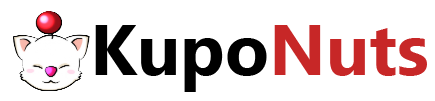
<style>
.page{position:relative;width:435px;height:101px;background:#ffffff}
.page>*{position:absolute;margin:0}
.t1{font:72px "Ebrima-Bold";color:#000000}
.t2{font:72px "Ebrima-Bold";color:#c72727}
</style>
<div class="page">
<p class="t1" style="left:95px;top:25px;width:332px;height:67px">Kupo<span class="t2">Nuts</span></p>
</div>
